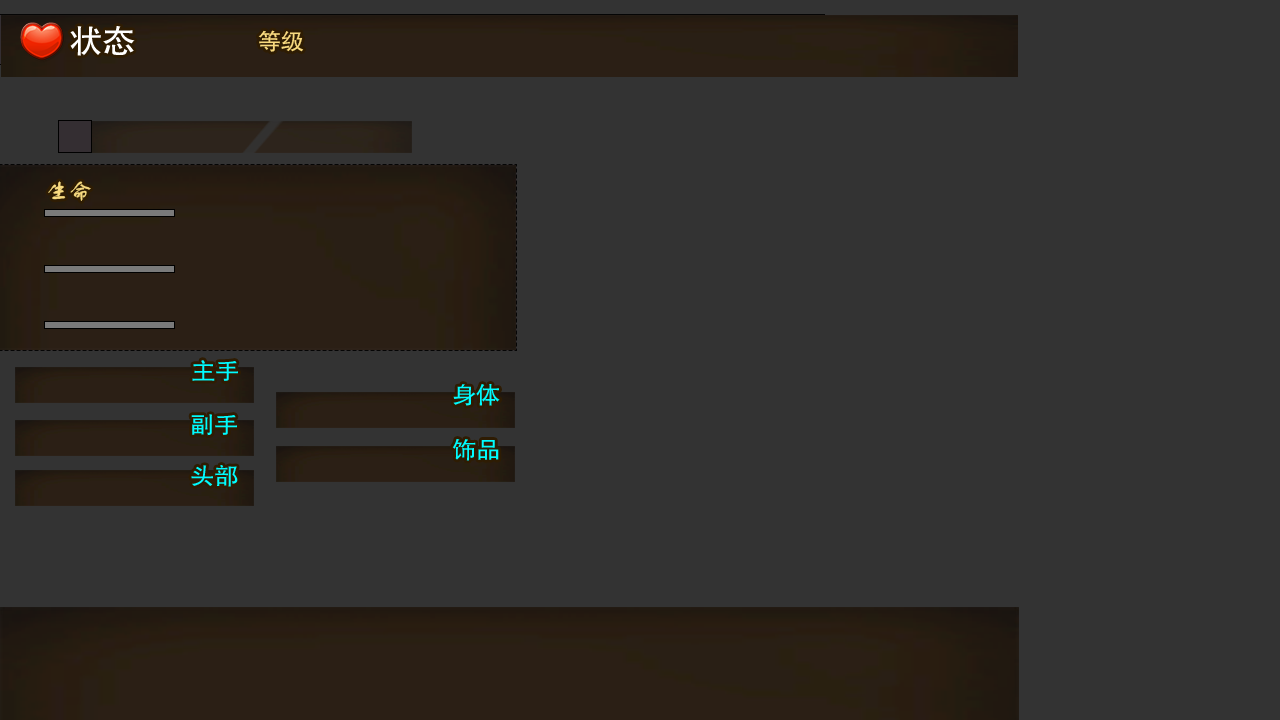
<style>
.page{position:relative;width:1280px;height:720px;background:#333333}
.page>*{position:absolute;margin:0}
.t1{font:32.3px "FZHTJW--GB1-0";letter-spacing:-0.025em;color:#ffffff;scale:1.04 1}
.t2{font:22.3px "FZHTJW--GB1-0";letter-spacing:-0.025em;color:#f8da7f;scale:1.04 1}
.t3{font:22.3px "FZSTK--GBK1-0";letter-spacing:-0.025em;color:#f8da7f;scale:1.04 1}
.t4{font:23.6px "FZHTJW--GB1-0";letter-spacing:-0.025em;color:#00fcff;scale:1.04 1}
</style>
<div class="page">
<p class="t1" style="left:70px;top:26px;width:65px;height:30px">状态</p>
<p class="t2" style="left:258px;top:30px;width:46px;height:22px">等级</p>
<p class="t3" style="left:48px;top:181px;width:43px;height:20px">生命</p>
<p class="t4" style="left:192px;top:360px;width:46px;height:21px">主手</p>
<p class="t4" style="left:453px;top:384px;width:47px;height:22px">身体</p>
<p class="t4" style="left:191px;top:414px;width:46px;height:22px">副手</p>
<p class="t4" style="left:452px;top:439px;width:47px;height:22px">饰品</p>
<p class="t4" style="left:191px;top:465px;width:47px;height:22px">头部</p>
</div>
